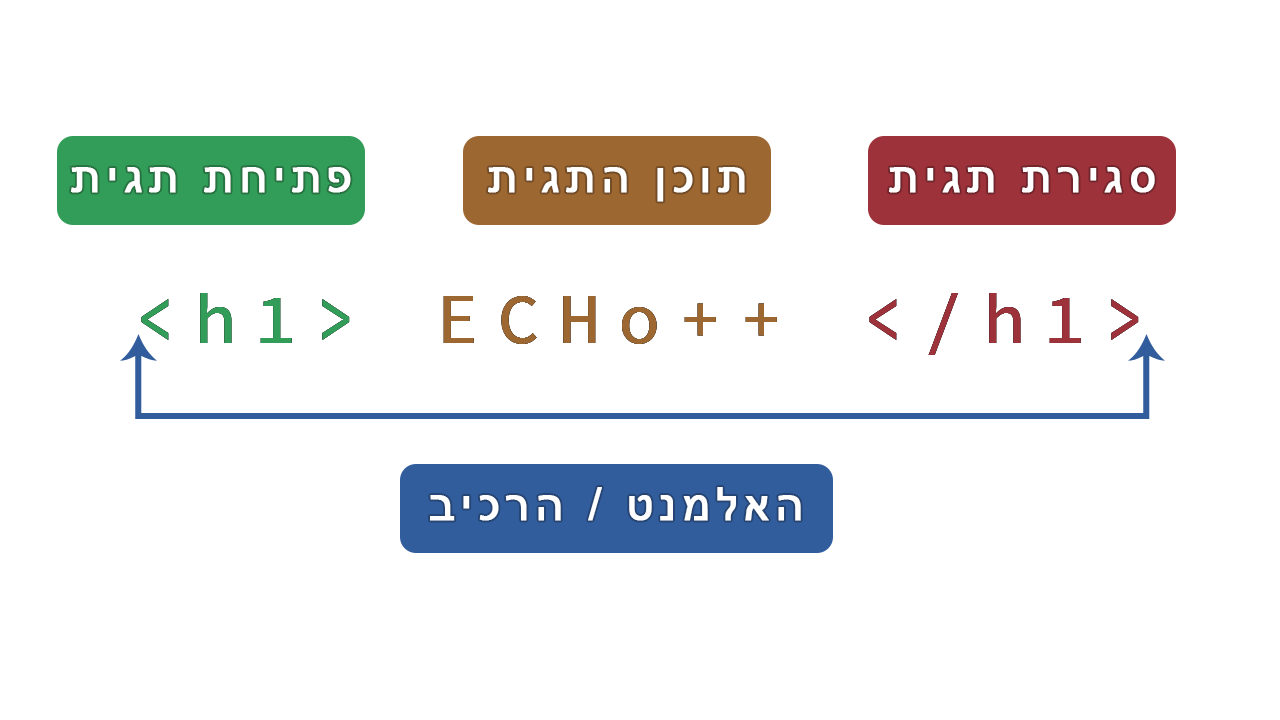
<style>
.page{position:relative;width:1280px;height:720px;background:#ffffff}
.page>*{position:absolute;margin:0}
.t1{font:45.6px "ArialMT";letter-spacing:0.115em;color:#ffffff;font-weight:bold}
.t2{font:71px "SourceCodePro-Medium";letter-spacing:0.255em}
</style>
<div class="page">
<p class="t1" style="left:71px;top:167px;width:280px;height:26px">פתיחת תגית</p>
<p class="t1" style="left:488px;top:167px;width:257px;height:35px">תוכן התגית</p>
<p class="t1" style="left:889px;top:167px;width:266px;height:26px">סגירת תגית</p>
<p class="t2" style="left:141px;top:293px;width:998px;height:62px">&lt;h1&gt; ECHo++ &lt;/h1&gt;</p>
<p class="t1" style="left:430px;top:487px;width:371px;height:34px">האלמנט / הרכיב</p>
</div>
